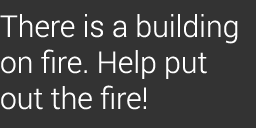
<style>
.page{position:relative;width:256px;height:128px;background:#333333}
.page>*{position:absolute;margin:0}
.t1{font:30px "Roboto-Light";color:#ffffff}
</style>
<div class="page">
<p class="t1" style="left:0px;top:14px;width:238px;height:96px">There is a building on fire. Help put out the fire!</p>
</div>
